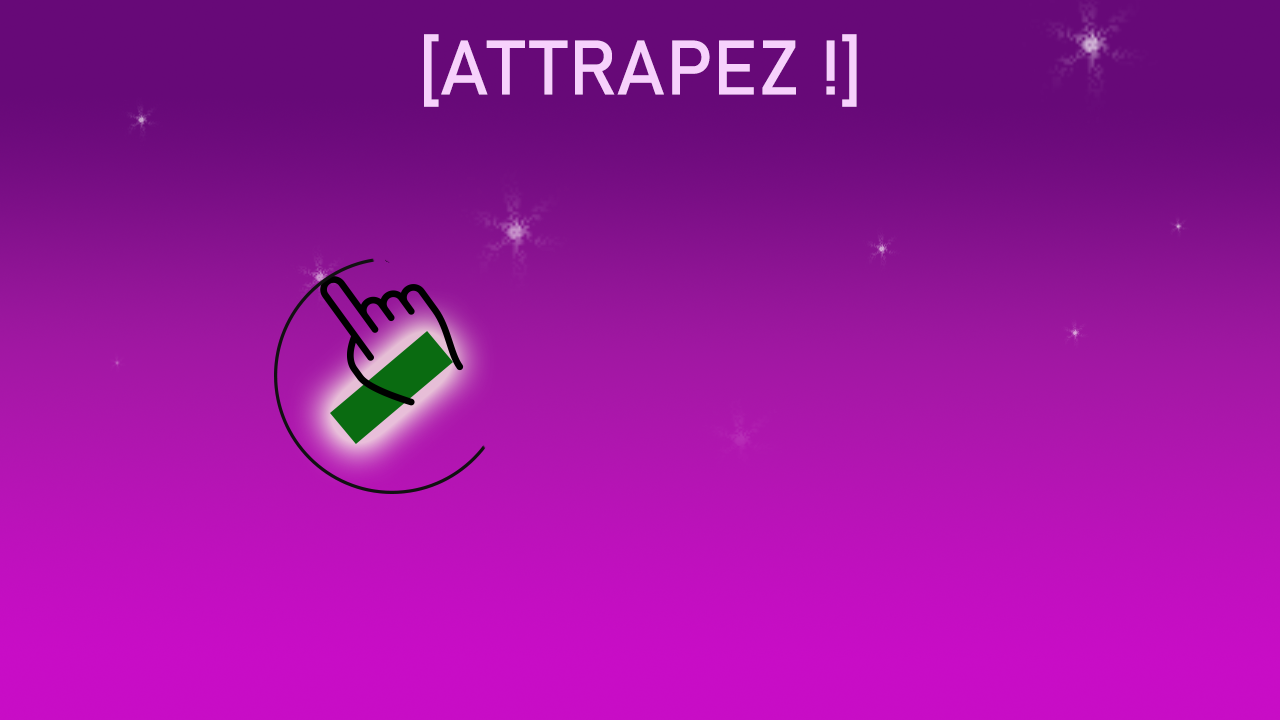
<style>
.page{position:relative;width:1280px;height:720px}
.page>*{position:absolute;margin:0}
.t1{font:129.9px "Bahnschrift";letter-spacing:0.005em;color:#f7d1fc}
</style>
<div class="page">
<p class="t1" style="left:424px;top:34px;width:433px;height:73px">[ATTRAPEZ !]</p>
</div>
